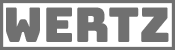
<style>
.page{position:relative;width:175px;height:50px;background:#707070}
.page>*{position:absolute;margin:0}
.t1{font:48px "Preview";color:#707070}
</style>
<div class="page">
<p class="t1" style="left:6px;top:7px;width:163px;height:35px">WERTZ</p>
</div>
